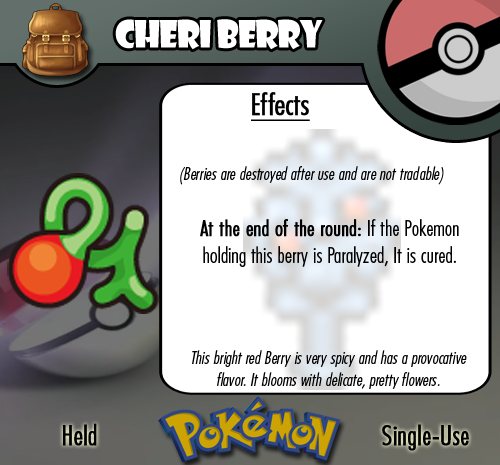
<style>
.page{position:relative;width:500px;height:465px;background:#ffffff}
.page>*{position:absolute;margin:0}
.t1{font:36.7px "ShowcardGothic-Reg";letter-spacing:-0.025em;color:#ffffff;scale:0.91 1}
.t2{font:22.2px "FuturaCondensedBQ-Light";color:#010101}
.t3{font:27.8px "FuturaCondensedBQ-Light";color:#010101;font-weight:bold}
.t4{font:30.6px "FuturaCondensedBQ-Light";color:#010101;font-weight:bold;text-decoration:underline}
.t5{font:18.1px "FuturaCondensedBQ-Light";color:#010101;font-style:italic}
.t6{font:22.2px "FuturaCondensedBQ-Light";color:#010101;font-weight:bold}
</style>
<div class="page">
<p class="t1" style="left:115px;top:19px;width:208px;height:31px">Cheri Berry</p>
<p class="t2" style="left:180px;top:92px;width:279px;height:175px"><span class="t3">  </span><span class="t4">Effects<br><br><br></span><span class="t5">(Berries are destroyed after use and are not tradable)<br><br><br><br></span><span class="t6">At the end of the round:</span> If the Pokemon holding this berry is Paralyzed, It is cured.</p>
<p class="t5" style="left:192px;top:350px;width:275px;height:39px;text-align:center">This bright red Berry is very spicy and has a provocative flavor. It blooms with delicate, pretty flowers.</p>
<p class="t3" style="left:63px;top:423px;width:34px;height:23px">Held</p>
<p class="t3" style="left:382px;top:424px;width:87px;height:27px">Single-Use</p>
</div>
